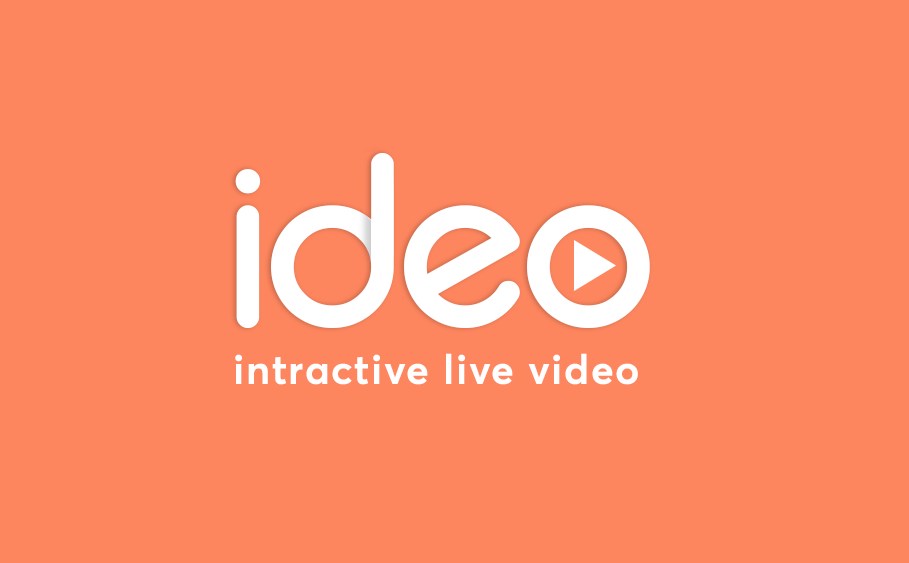
<style>
.page{position:relative;width:909px;height:563px;background:#fe865e}
.page>*{position:absolute;margin:0}
.t1{font:243px "";letter-spacing:-0.02em;color:#ffffff}
.t2{font:41px "AvertaCY-Bold";letter-spacing:0.04em;color:#ffffff}
</style>
<div class="page">
<p class="t1" style="left:235px;top:152px;width:415px;height:176px">ideo</p>
<p class="t2" style="left:235px;top:353px;width:403px;height:32px">intractive live video</p>
</div>
